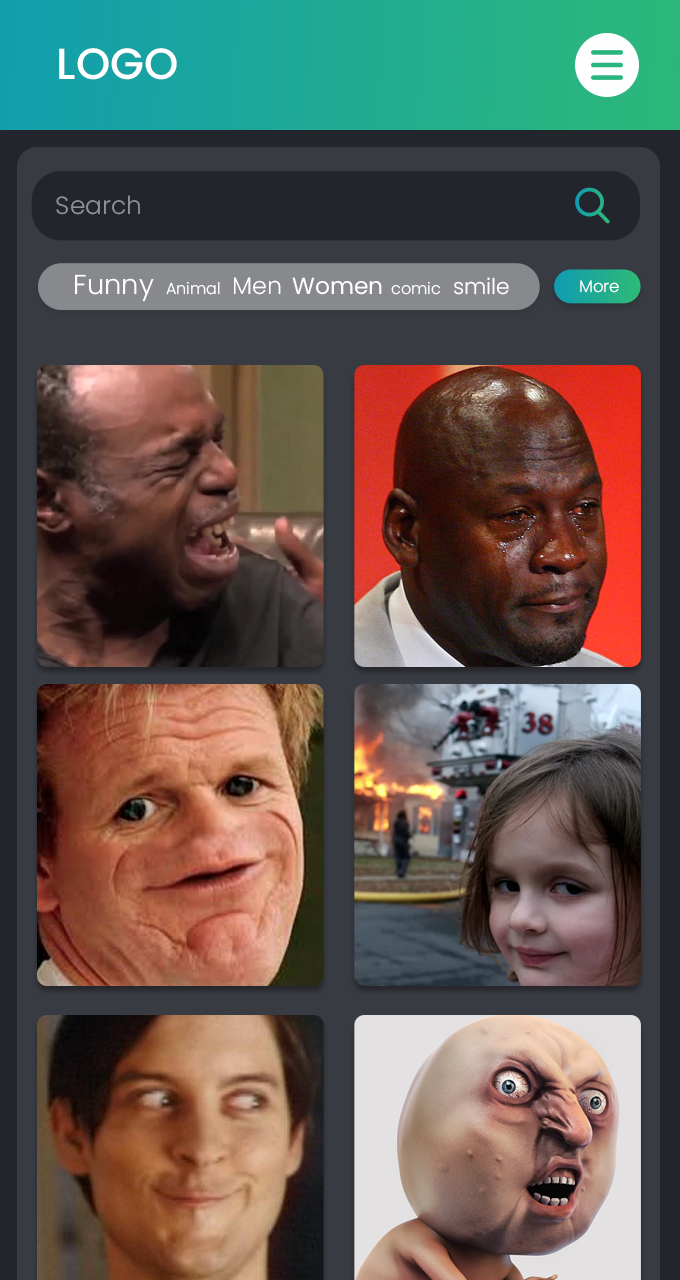
<style>
.page{position:relative;width:680px;height:1280px}
.page>*{position:absolute;margin:0}
.t1{font:43.7px "Poppins-Medium";color:#ffffff}
.t2{font:24.8px "Poppins-Light";color:#909193}
.t3{font:27.3px "Poppins-Light";color:#fefefe}
.t4{font:16px "Poppins-Light";color:#fefefe}
.t5{font:23.8px "Poppins-Light";color:#fefefe}
.t6{font:23.4px "Poppins-Regular";color:#fefefe}
.t7{font:21.8px "Poppins-Light";color:#fefefe}
.t8{font:16.5px "Poppins-Light";color:#fefefe}
</style>
<div class="page">
<p class="t1" style="left:59px;top:48px;width:118px;height:32px">LOGO</p>
<p class="t2" style="left:56px;top:195px;width:84px;height:20px">Search</p>
<p class="t3" style="left:75px;top:274px;width:79px;height:28px">Funny</p>
<p class="t4" style="left:166px;top:281px;width:54px;height:14px">Animal</p>
<p class="t5" style="left:234px;top:277px;width:47px;height:18px">Men</p>
<p class="t6" style="left:292px;top:277px;width:90px;height:18px">Women</p>
<p class="t4" style="left:391px;top:281px;width:49px;height:14px">comic</p>
<p class="t7" style="left:454px;top:277px;width:55px;height:18px">smile</p>
<p class="t8" style="left:580px;top:280px;width:39px;height:13px">More</p>
</div>
